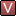
<style>
.page{position:relative;width:16px;height:16px;background:#000000}
.page>*{position:absolute;margin:0}
.t1{font:14px "ArialMT";color:#ffffff}
</style>
<div class="page">
<p class="t1" style="left:3px;top:3px;width:10px;height:10px">V</p>
</div>
